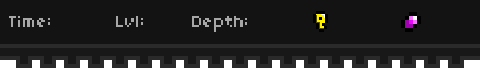
<style>
.page{position:relative;width:480px;height:68px;background:#131313}
.page>*{position:absolute;margin:0}
.t1{font:18px "04b03";color:#a7a7a7}
</style>
<div class="page">
<p class="t1" style="left:9px;top:16px;width:41px;height:11px">Time:</p>
<p class="t1" style="left:116px;top:16px;width:27px;height:11px">Lvl:</p>
<p class="t1" style="left:192px;top:16px;width:55px;height:16px">Depth:</p>
</div>
